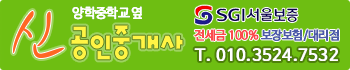
<style>
.page{position:relative;width:350px;height:70px;background:#6ebe12}
.page>*{position:absolute;margin:0}
.t1{font:13px "NanumBarunGothicOTF";letter-spacing:-0.05em;color:#ffffff;font-weight:bold}
.t2{font:12px "NanumBarunGothicOTF";letter-spacing:-0.05em;color:#fb4c4d;font-weight:bold}
.t3{font:12px "NanumBarunGothicOTF";letter-spacing:-0.05em;color:#4c5ba8;font-weight:bold}
.t4{font:16px "NanumBarunGothicOTF";letter-spacing:0.025em;color:#ffffff;font-weight:bold}
</style>
<div class="page">
<p class="t1" style="left:72px;top:6px;width:70px;height:14px">양학중학교 옆</p>
<p class="t2" style="left:194px;top:29px;width:145px;height:12px">전세금 100% <span class="t3">보장보험/대리점</span></p>
<p class="t4" style="left:194px;top:48px;width:144px;height:13px">T. 010.3524.7532</p>
</div>
